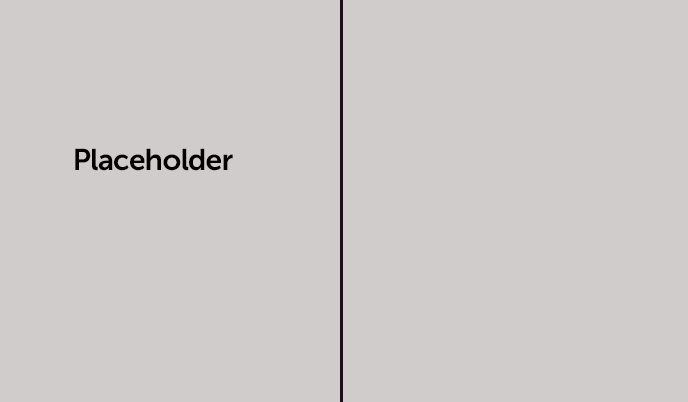
<style>
.page{position:relative;width:688px;height:402px;background:#d1cccc}
.page>*{position:absolute;margin:0}
.t1{font:30px "MuseoSans-700";letter-spacing:-0.025em;color:#020001}
</style>
<div class="page">
<p class="t1" style="left:75px;top:148px;width:158px;height:23px">Placeholder</p>
</div>
